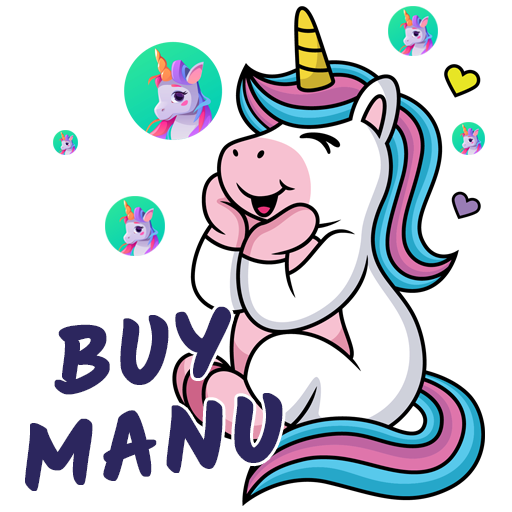
<style>
.page{position:relative;width:512px;height:512px;background:#ffffff}
.page>*{position:absolute;margin:0}
.t1{font:100px/91.7px "Kalam-Bold";letter-spacing:0.025em;color:#2c265e;font-weight:bold}
</style>
<div class="page">
<p class="t1" style="left:25px;top:306px;width:258px;height:185px;text-align:center;rotate:-7deg">BUY<br>MANU</p>
</div>
